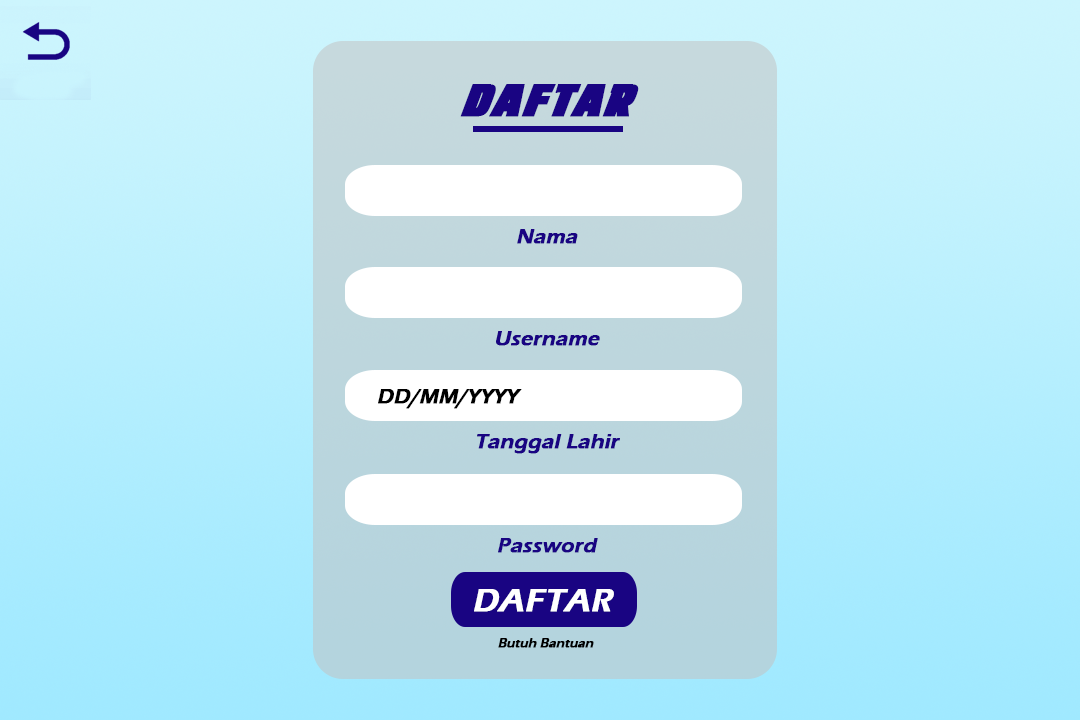
<style>
.page{position:relative;width:1080px;height:720px}
.page>*{position:absolute;margin:0}
.t1{font:45.4px "EMINOR-BlackItalic";color:#190482;font-weight:bold;font-style:italic;scale:1.19 1}
.t2{font:20.9px "ErasITC-Demi";color:#190482;font-weight:bold;font-style:italic}
.t3{font:20.9px "ErasITC-Demi";color:#000000;font-weight:bold;font-style:italic}
.t4{font:33.4px "ErasITC-Demi";color:#ffffff;font-weight:bold;font-style:italic}
.t5{font:12.5px "ErasITC-Demi";color:#000000;font-weight:bold;font-style:italic}
</style>
<div class="page">
<p class="t1" style="left:460px;top:84px;width:179px;height:33px">DAFTAR</p>
<p class="t2" style="left:517px;top:229px;width:61px;height:15px">Nama</p>
<p class="t2" style="left:496px;top:331px;width:104px;height:15px">Username</p>
<p class="t3" style="left:378px;top:389px;width:144px;height:20px">DD/MM/YYYY</p>
<p class="t2" style="left:477px;top:434px;width:143px;height:20px">Tanggal Lahir</p>
<p class="t2" style="left:498px;top:538px;width:100px;height:15px">Password</p>
<p class="t4" style="left:474px;top:589px;width:140px;height:23px">DAFTAR</p>
<p class="t5" style="left:498px;top:638px;width:96px;height:10px">Butuh Bantuan</p>
</div>
